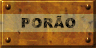
<style>
.page{position:relative;width:96px;height:48px}
.page>*{position:absolute;margin:0}
.t1{font:13.3px "Arial-Black";letter-spacing:0.045em;text-transform:uppercase}
</style>
<div class="page">
<p class="t1" style="left:21px;top:15px;width:55px;height:13px">PORÃO</p>
</div>
